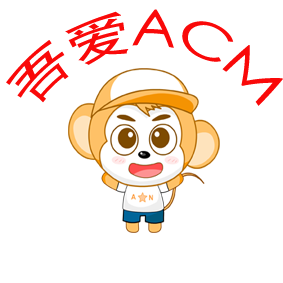
<style>
.page{position:relative;width:283px;height:283px;background:#ffffff}
.page>*{position:absolute;margin:0}
.t1{font:48px "STHeiti";color:#f90909}
</style>
<div class="page">
<p class="t1" style="left:6px;top:9px;width:277px;height:97px">吾爱ACM</p>
</div>
